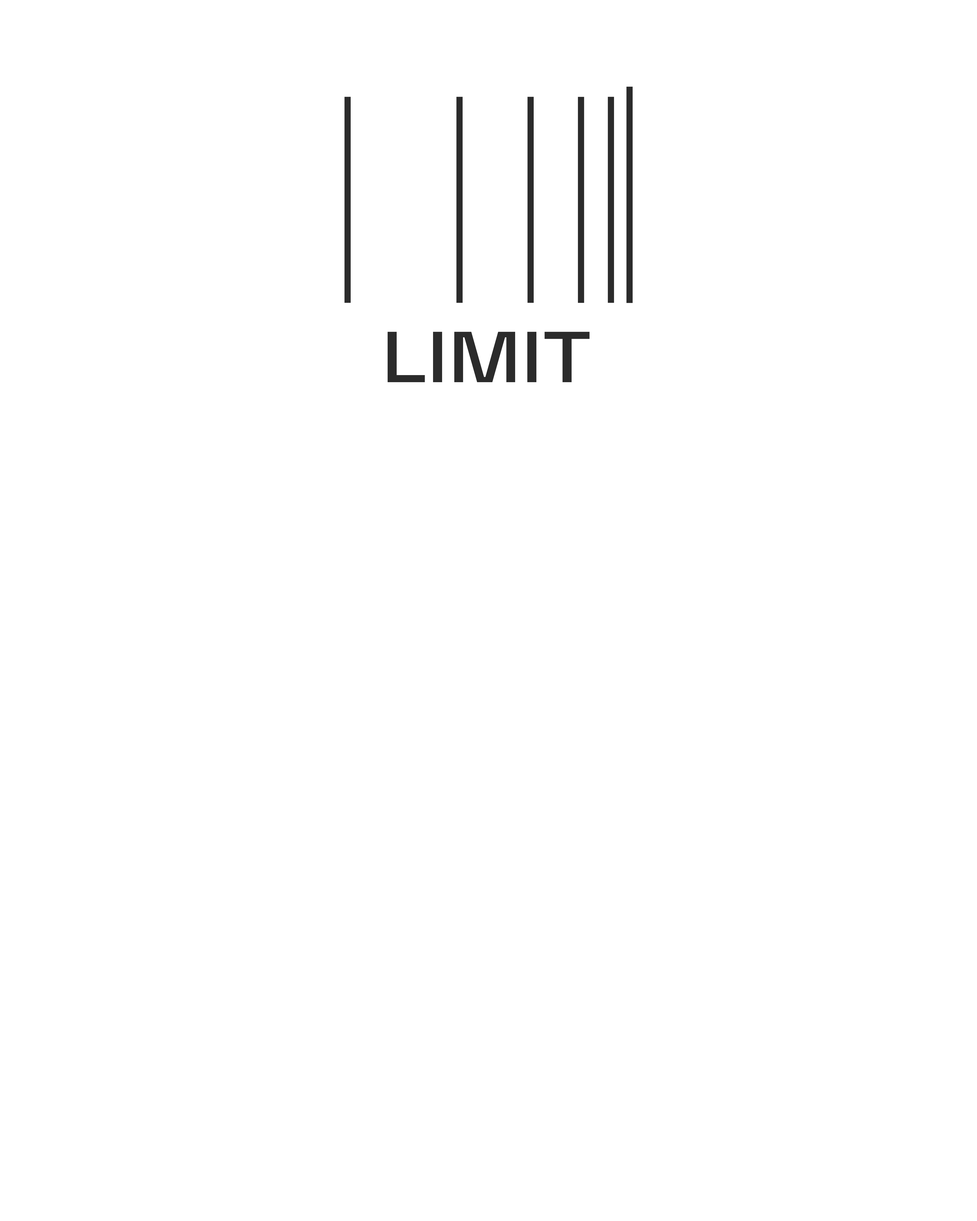
<style>
.page{position:relative;width:977px;height:1221px;background:#ffffff}
.page>*{position:absolute;margin:0}
.t1{font:72px "SpaceGroteskLight-Medium";color:#2b2b2b;scale:1.16 1}
</style>
<div class="page">
<p class="t1" style="left:387px;top:332px;width:202px;height:50px">LIMIT</p>
</div>
